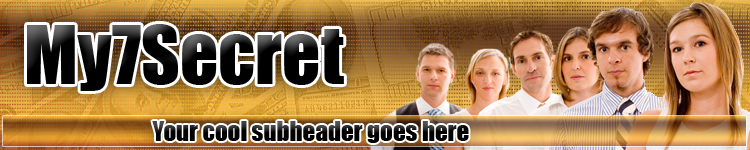
<style>
.page{position:relative;width:750px;height:150px}
.page>*{position:absolute;margin:0}
.t1{font:75px "Impact";color:#000000}
.t2{font:25px "Impact";color:#000000}
</style>
<div class="page">
<p class="t1" style="left:27px;top:24px;width:317px;height:67px">My7Secret</p>
<p class="t2" style="left:152px;top:121px;width:317px;height:22px">Your cool subheader goes here</p>
</div>
